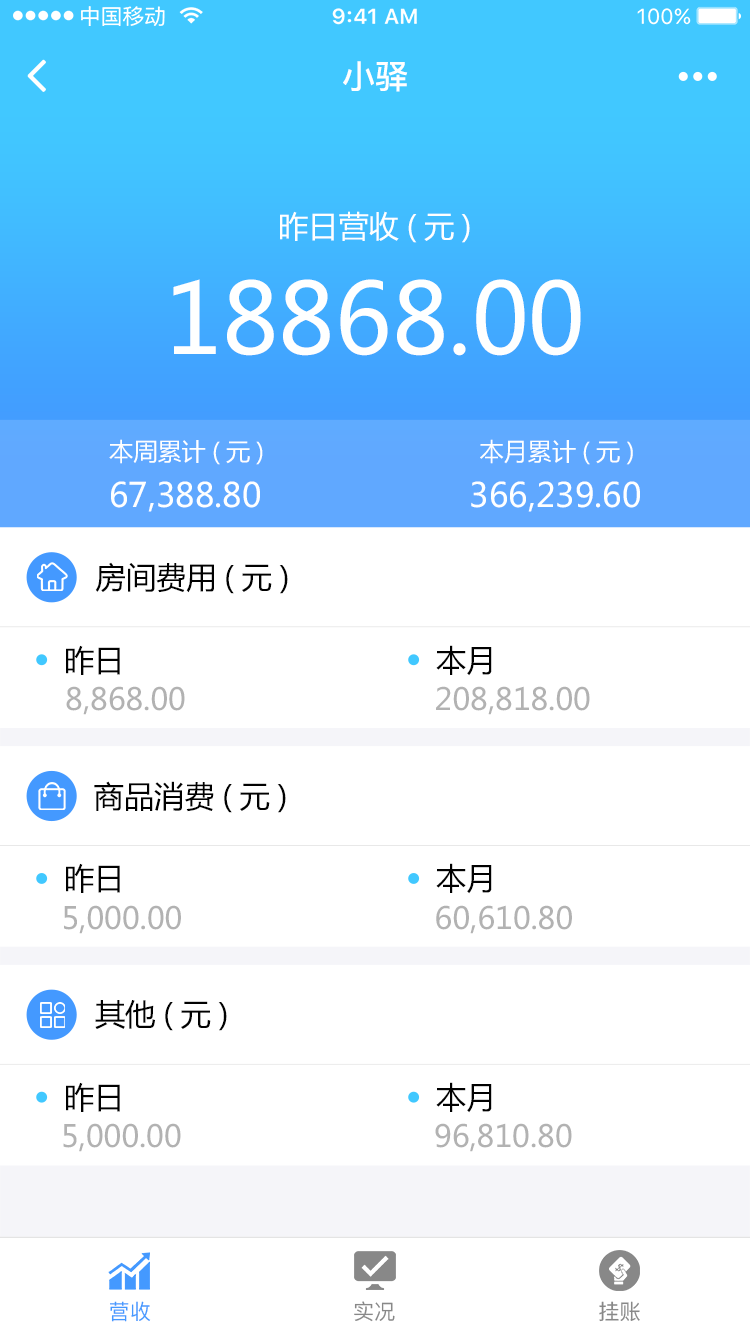
<style>
.page{position:relative;width:750px;height:1334px;background:#ffffff}
.page>*{position:absolute;margin:0}
.t1{font:33.2px "PingFang-SC-Bold";color:#ffffff}
.t2{font:30.2px "MicrosoftYaHei";color:#feffff}
.t3{font:96.7px "MicrosoftYaHei";color:#feffff}
.t4{font:24.2px "MicrosoftYaHei";color:#feffff}
.t5{font:33.2px "MicrosoftYaHei";color:#feffff}
.t6{font:30.2px "MicrosoftYaHei";color:#010101}
.t7{font:30.2px "MicrosoftYaHei";color:#b2b2b2}
.t8{font:21.1px "PingFang-SC-Medium";color:#4499ff}
.t9{font:21.1px "PingFang-SC-Medium";color:#888888}
</style>
<div class="page">
<p class="t1" style="left:343px;top:61px;width:65px;height:31px">小驿</p>
<p class="t2" style="left:280px;top:211px;width:190px;height:32px">昨日营收(元)</p>
<p class="t3" style="left:173px;top:279px;width:408px;height:77px">18868.00</p>
<p class="t4" style="left:109px;top:439px;width:154px;height:26px">本周累计(元)</p>
<p class="t4" style="left:480px;top:439px;width:153px;height:26px">本月累计(元)</p>
<p class="t5" style="left:111px;top:481px;width:149px;height:31px">67,388.80</p>
<p class="t5" style="left:471px;top:481px;width:169px;height:31px">366,239.60</p>
<p class="t6" style="left:95px;top:562px;width:193px;height:32px">房间费用(元)</p>
<p class="t6" style="left:66px;top:645px;width:54px;height:30px">昨日</p>
<p class="t6" style="left:436px;top:645px;width:56px;height:31px">本月</p>
<p class="t7" style="left:66px;top:686px;width:119px;height:29px">8,868.00</p>
<p class="t7" style="left:436px;top:686px;width:154px;height:29px">208,818.00</p>
<p class="t6" style="left:94px;top:781px;width:192px;height:32px">商品消费(元)</p>
<p class="t6" style="left:66px;top:863px;width:54px;height:30px">昨日</p>
<p class="t6" style="left:436px;top:863px;width:56px;height:31px">本月</p>
<p class="t7" style="left:64px;top:905px;width:117px;height:29px">5,000.00</p>
<p class="t7" style="left:436px;top:905px;width:136px;height:29px">60,610.80</p>
<p class="t6" style="left:95px;top:1000px;width:132px;height:31px">其他(元)</p>
<p class="t6" style="left:66px;top:1082px;width:54px;height:30px">昨日</p>
<p class="t6" style="left:436px;top:1082px;width:56px;height:31px">本月</p>
<p class="t7" style="left:63px;top:1123px;width:118px;height:29px">5,000.00</p>
<p class="t7" style="left:435px;top:1123px;width:137px;height:29px">96,810.80</p>
<p class="t8" style="left:110px;top:1301px;width:41px;height:21px">营收</p>
<p class="t9" style="left:354px;top:1301px;width:41px;height:21px">实况</p>
<p class="t9" style="left:599px;top:1301px;width:41px;height:21px">挂账</p>
</div>
